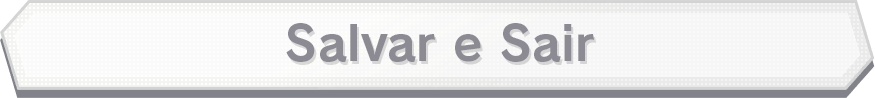
<style>
.page{position:relative;width:875px;height:98px}
.page>*{position:absolute;margin:0}
.t1{font:48px "RodinPro-B";color:#8c8b93}
</style>
<div class="page">
<p class="t1" style="left:286px;top:23px;width:308px;height:39px">Salvar e Sair</p>
</div>
